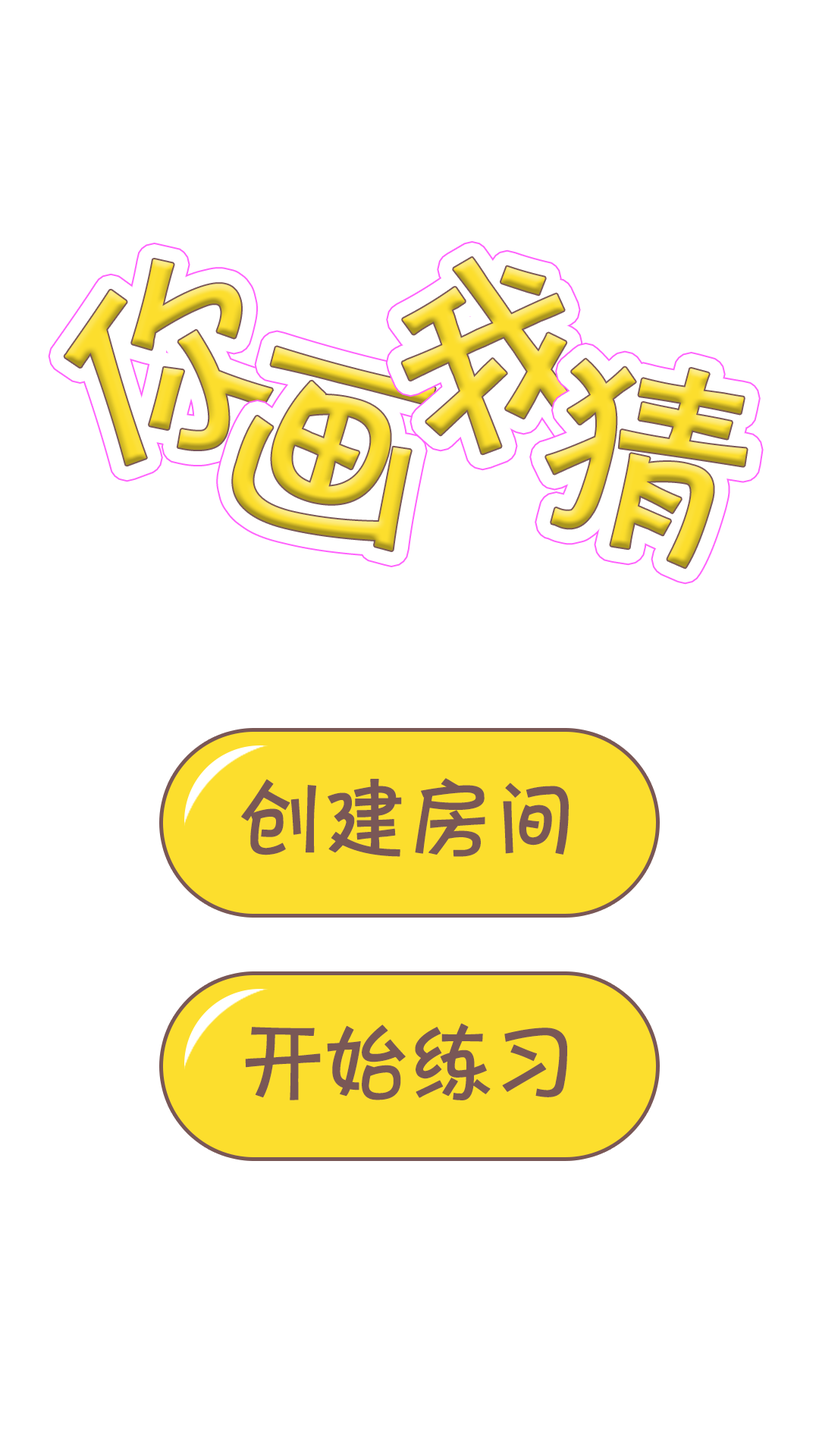
<style>
.page{position:relative;width:819px;height:1456px;background:#ffffff}
.page>*{position:absolute;margin:0}
.t1{font:227.5px "Jkaton";font-weight:bold}
.t2{font:227.5px "Jkaton";color:#fcde2d;font-weight:bold}
.t3{font:91px "Jkaton";letter-spacing:-0.1em;color:#795756;font-weight:bold}
</style>
<div class="page">
<p class="t1" style="left:402px;top:257px;width:183px;height:197px;rotate:-15deg">我</p>
<p class="t2" style="left:64px;top:259px;width:208px;height:207px;rotate:-15deg">你</p>
<p class="t1" style="left:233px;top:347px;width:202px;height:204px;rotate:15deg">画</p>
<p class="t1" style="left:546px;top:359px;width:201px;height:209px;rotate:15deg">猜</p>
<p class="t3" style="left:241px;top:778px;width:328px;height:79px">创建房间</p>
<p class="t3" style="left:245px;top:1023px;width:322px;height:77px">开始练习</p>
</div>
